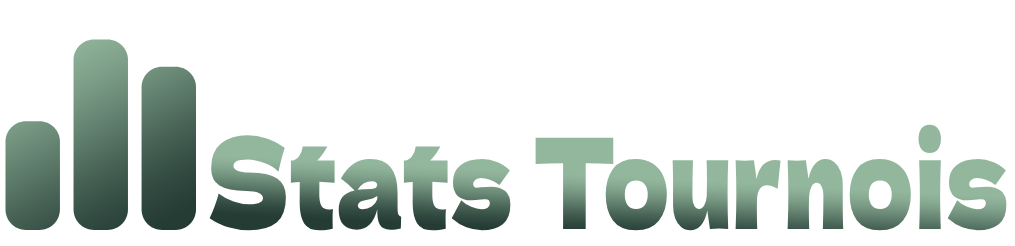
<style>
.page{position:relative;width:1015px;height:246px;background:#ffffff}
.page>*{position:absolute;margin:0}
.t1{font:125.7px "DelaGothicOne-Regular";scale:0.72 1}
</style>
<div class="page">
<p class="t1" style="left:209px;top:124px;width:798px;height:107px">Stats Tournois</p>
</div>
